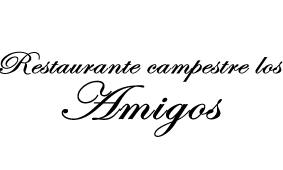
<style>
.page{position:relative;width:283px;height:170px;background:#ffffff}
.page>*{position:absolute;margin:0}
.t1{font:31.8px "EdwardianScriptITC";color:#000000;font-weight:bold;scale:1.15 1}
.t2{font:54.5px "EdwardianScriptITC";color:#000000;font-weight:bold;scale:1.15 1}
</style>
<div class="page">
<p class="t1" style="left:0px;top:51px;width:283px;height:86px;text-align:center">Restaurante campestre los<br><br><span class="t2">Amigos</span></p>
</div>
